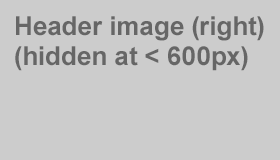
<style>
.page{position:relative;width:280px;height:160px;background:#cccccc}
.page>*{position:absolute;margin:0}
.t1{font:26px/30px "Arial-BoldMT";color:#666666}
</style>
<div class="page">
<p class="t1" style="left:15px;top:16px;width:249px;height:55px">Header image (right)<br>(hidden at &lt; 600px)</p>
</div>
